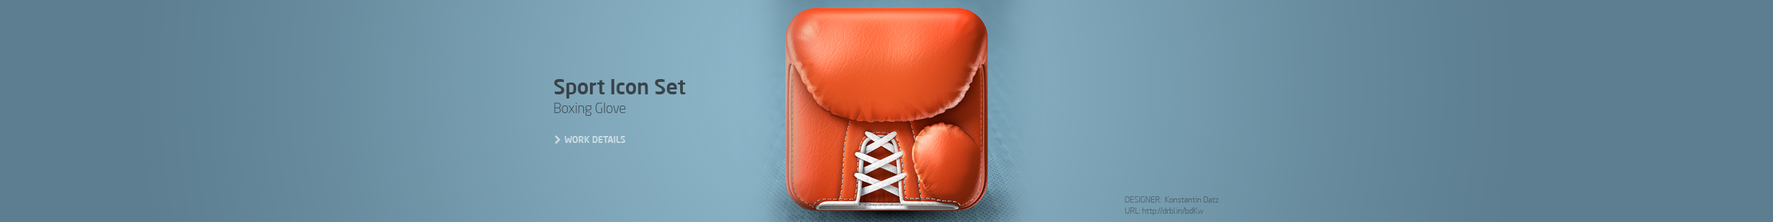
<style>
.page{position:relative;width:1773px;height:222px;background:#5c7e90}
.page>*{position:absolute;margin:0}
.t1{font:20.8px "NeoSansPro-Medium";letter-spacing:-0.005em;color:#394449}
.t2{font:13.8px "NeoSansPro-Light";letter-spacing:-0.005em;color:#435159}
.t3{font:9px "NeoSansPro-Medium";letter-spacing:-0.005em;color:#ccdce4}
.t4{font:8.3px "NeoSansPro-Light";letter-spacing:-0.005em;color:#506671}
.t5{font:8.3px "NeoSansPro-Light";letter-spacing:-0.005em;color:#516671}
</style>
<div class="page">
<p class="t1" style="left:554px;top:79px;width:132px;height:19px">Sport Icon Set</p>
<p class="t2" style="left:554px;top:102px;width:71px;height:14px">Boxing Glove</p>
<p class="t3" style="left:564px;top:136px;width:61px;height:7px">WORK DETAILS</p>
<p class="t4" style="left:1125px;top:196px;width:94px;height:6px">DESIGNER:  Konstantin Datz</p>
<p class="t5" style="left:1125px;top:207px;width:79px;height:8px">URL: http://drbl.in/bdKw</p>
</div>
